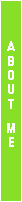
<style>
.page{position:relative;width:22px;height:202px;background:#87df28}
.page>*{position:absolute;margin:0}
.t1{font:14.4px "Liberator";color:#ffffff}
</style>
<div class="page">
<p class="t1" style="left:7px;top:41px;width:8px;height:106px">ABOUT  ME</p>
</div>
